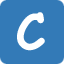
<style>
.page{position:relative;width:64px;height:64px;background:#337ab7}
.page>*{position:absolute;margin:0}
.t1{font:48.9px "ComicSansMS-Bold";color:#ffffff}
</style>
<div class="page">
<p class="t1" style="left:17px;top:12px;width:28px;height:39px;rotate:-6deg">C</p>
</div>
